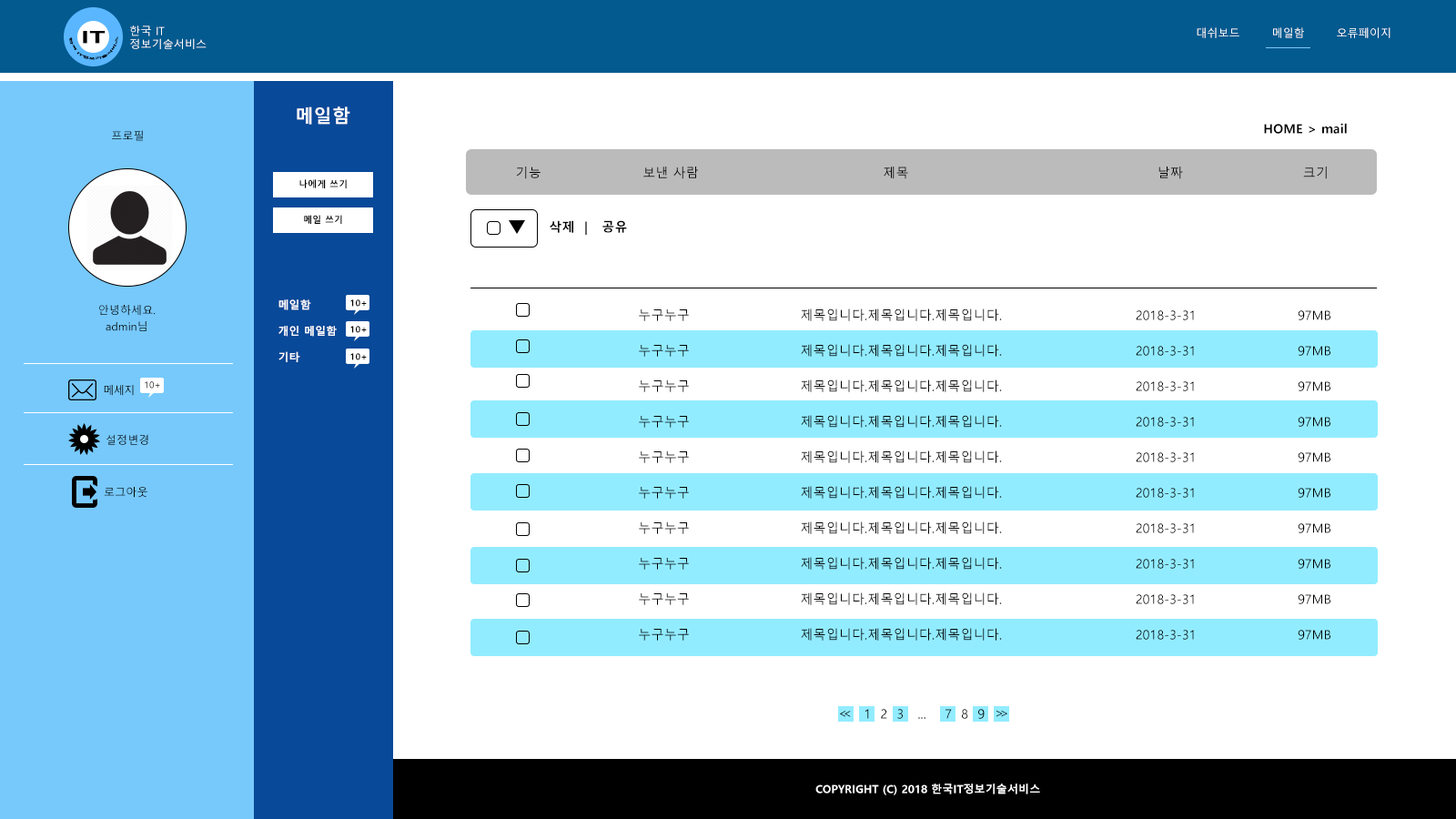
<style>
.page{position:relative;width:1456px;height:819px;background:#ffffff}
.page>*{position:absolute;margin:0}
.t1{font:10.9px "MalgunGothic";letter-spacing:0.01em;color:#ffffff}
.t2{font:2.7px "MalgunGothicBold";letter-spacing:-0.01em;color:#000000;scale:1.6 1}
.t3{font:16.4px "MalgunGothicBold";letter-spacing:-0.01em;color:#000000;font-weight:bold;scale:1.6 1}
.t4{font:18.2px "MalgunGothicBold";letter-spacing:0.01em;color:#ffffff}
.t5{font:12.7px "MalgunGothicBold";letter-spacing:0.01em;color:#000000}
.t6{font:10.9px "MalgunGothic";letter-spacing:0.01em;color:#000000}
.t7{font:12.7px "MalgunGothic";letter-spacing:0.01em;color:#000000}
.t8{font:9.1px "MalgunGothicBold";letter-spacing:0.01em;color:#000000}
.t9{font:10.9px/16.4px "MalgunGothic";letter-spacing:0.01em;color:#000000}
.t10{font:10.9px "MalgunGothicBold";letter-spacing:0.01em;color:#ffffff}
.t11{font:12.7px/35.5px "MalgunGothic";letter-spacing:0.01em;color:#000000}
.t12{font:9.1px "MalgunGothic";letter-spacing:0.01em}
.t13{font:12.7px "MalgunGothic";letter-spacing:-0.33em}
.t14{font:12.9px "MalgunGothic";letter-spacing:-0.33em;scale:1.05 1}
</style>
<div class="page">
<p class="t1" style="left:130px;top:25px;width:77px;height:24px">한국 IT<br>정보기술서비스</p>
<p class="t1" style="left:130px;top:25px;width:77px;height:24px">한국 IT<br>정보기술서비스</p>
<p class="t1" style="left:1197px;top:27px;width:193px;height:11px">대쉬보드        메일함        오류페이지</p>
<p class="t1" style="left:1197px;top:27px;width:193px;height:11px">대쉬보드        메일함        오류페이지</p>
<p class="t2" style="left:69px;top:36px;width:49px;height:24px;text-align:center">한국 IT정보기술서비스</p>
<p class="t2" style="left:69px;top:36px;width:49px;height:24px;text-align:center">한국 IT정보기술서비스</p>
<p class="t3" style="left:83px;top:31px;width:23px;height:13px">IT</p>
<p class="t3" style="left:83px;top:31px;width:23px;height:13px">IT</p>
<p class="t4" style="left:297px;top:106px;width:53px;height:19px">메일함</p>
<p class="t5" style="left:1264px;top:123px;width:83px;height:11px">HOME &gt; mail</p>
<p class="t6" style="left:112px;top:130px;width:31px;height:11px">프로필</p>
<p class="t7" style="left:516px;top:167px;width:811px;height:12px">기능                      보낸 사람                                        제목                                                      날짜                          크기</p>
<p class="t8" style="left:299px;top:179px;width:48px;height:9px">나에게 쓰기</p>
<p class="t8" style="left:304px;top:215px;width:38px;height:9px">메일 쓰기</p>
<p class="t5" style="left:550px;top:220px;width:77px;height:15px">삭제  |   공유</p>
<p class="t9" style="left:99px;top:305px;width:57px;height:26px;text-align:center">안녕하세요.<br>admin님</p>
<p class="t10" style="left:278px;top:299px;width:59px;height:63px">메일함<br><br>개인 메일함<br><br>기타</p>
<p class="t8" style="left:350px;top:299px;width:17px;height:8px">10+</p>
<p class="t11" style="left:639px;top:308px;width:691px;height:333px">누구누구                        제목입니다.제목입니다.제목입니다.                             2018-3-31                      97MB<br>누구누구                        제목입니다.제목입니다.제목입니다.                             2018-3-31                      97MB<br>누구누구                        제목입니다.제목입니다.제목입니다.                             2018-3-31                      97MB<br>누구누구                        제목입니다.제목입니다.제목입니다.                             2018-3-31                      97MB<br>누구누구                        제목입니다.제목입니다.제목입니다.                             2018-3-31                      97MB<br>누구누구                        제목입니다.제목입니다.제목입니다.                             2018-3-31                      97MB<br>누구누구                        제목입니다.제목입니다.제목입니다.                             2018-3-31                      97MB<br>누구누구                        제목입니다.제목입니다.제목입니다.                             2018-3-31                      97MB<br>누구누구                        제목입니다.제목입니다.제목입니다.                             2018-3-31                      97MB<br>누구누구                        제목입니다.제목입니다.제목입니다.                             2018-3-31                      97MB</p>
<p class="t8" style="left:350px;top:326px;width:17px;height:7px">10+</p>
<p class="t8" style="left:350px;top:353px;width:17px;height:7px">10+</p>
<p class="t6" style="left:104px;top:385px;width:30px;height:11px">메세지</p>
<p class="t12" style="left:145px;top:381px;width:15px;height:8px">10+</p>
<p class="t6" style="left:106px;top:434px;width:42px;height:11px">설정변경</p>
<p class="t6" style="left:104px;top:487px;width:43px;height:11px">로그아웃</p>
<p class="t13" style="left:840px;top:711px;width:11px;height:6px">&lt;&lt;</p>
<p class="t7" style="left:865px;top:709px;width:120px;height:10px">1  2  3   ...    7  8  9</p>
<p class="t14" style="left:996px;top:710px;width:11px;height:7px;rotate:180deg">&lt;&lt;</p>
<p class="t10" style="left:815px;top:783px;width:225px;height:12px">COPYRIGHT (C) 2018 한국IT정보기술서비스</p>
</div>
